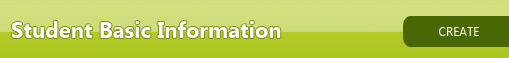
<style>
.page{position:relative;width:509px;height:58px}
.page>*{position:absolute;margin:0}
.t1{font:22px "SegoeUI-Bold";color:#fefefe}
.t2{font:12px "SegoeUI";color:#f6f7f1}
</style>
<div class="page">
<p class="t1" style="left:12px;top:21px;width:269px;height:17px">Student Basic Information</p>
<p class="t2" style="left:439px;top:27px;width:40px;height:9px">CREATE</p>
</div>
